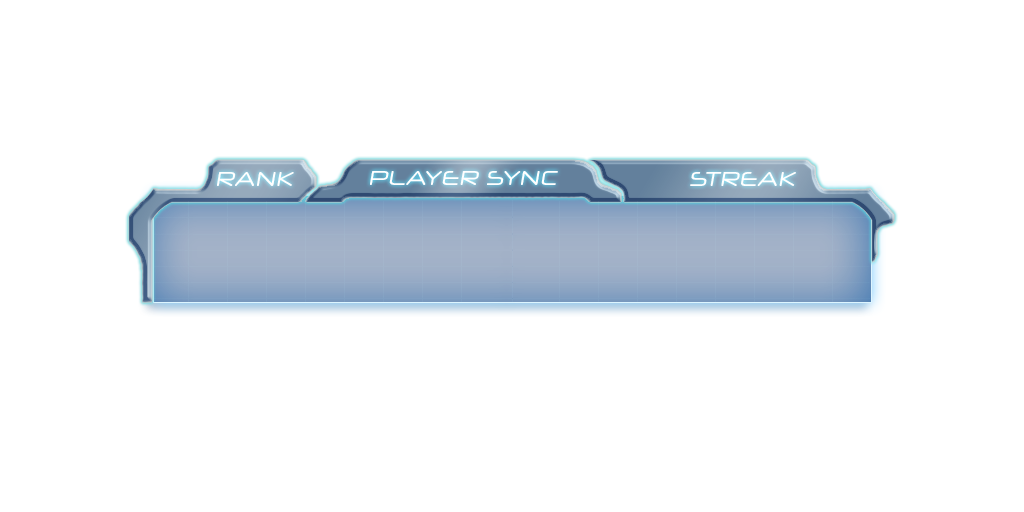
<style>
.page{position:relative;width:1024px;height:512px;background:#ffffff}
.page>*{position:absolute;margin:0}
.t1{font:20px "NeuropolXFree";color:#ffffff;font-style:italic}
</style>
<div class="page">
<p class="t1" style="left:217px;top:172px;width:77px;height:14px">RANK</p>
<p class="t1" style="left:370px;top:171px;width:188px;height:14px">PLAYER SYNC</p>
<p class="t1" style="left:690px;top:172px;width:106px;height:14px">STREAK</p>
</div>
